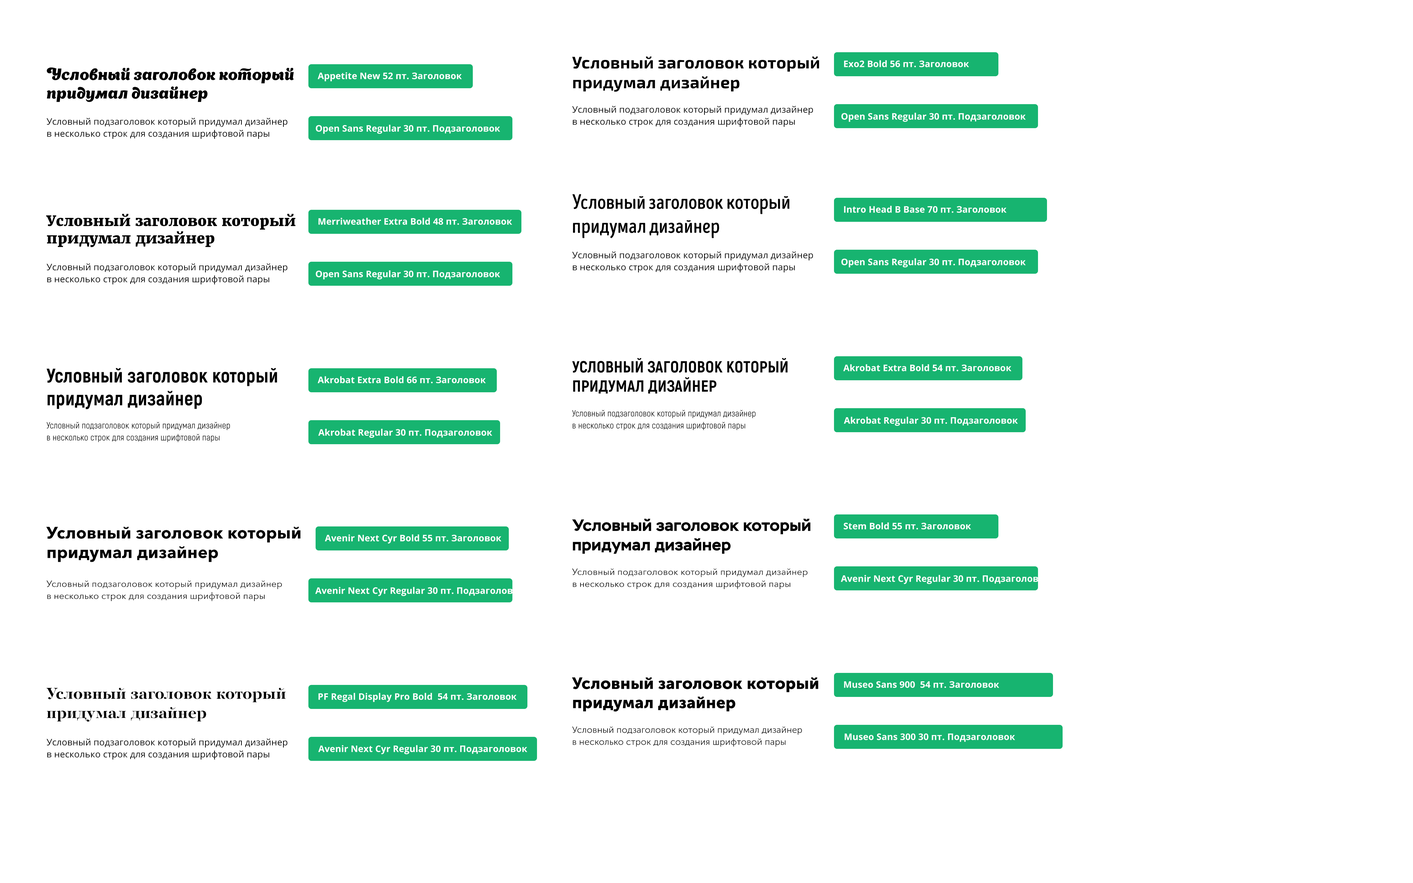
<style>
.page{position:relative;width:1413px;height:883px;background:#ffffff}
.page>*{position:absolute;margin:0}
.t1{font:16.8px/19.8px "Exo2-Bold";letter-spacing:0.01em;color:#000000}
.t2{font:9px "OpenSans-Bold";letter-spacing:0.01em;color:#ffffff}
.t3{font:15.6px/18.6px "AppetiteNew";letter-spacing:0.01em;color:#000000}
.t4{font:9px/12px "OpenSans";letter-spacing:0.01em;color:#000000}
.t5{font:21px/24px "IntroHeadB-Base";letter-spacing:0.01em;color:#000000}
.t6{font:14.4px/17.4px "Merriweather-UltraBold";letter-spacing:0.01em;color:#000000}
.t7{font:16.2px/19.2px "Akrobat-ExtraBold";letter-spacing:0.01em;color:#000000;text-transform:uppercase}
.t8{font:19.8px/22.8px "Akrobat-ExtraBold";letter-spacing:0.01em;color:#000000}
.t9{font:9px/12px "Akrobat-Regular";letter-spacing:0.01em;color:#000000}
.t10{font:16.5px/19.5px "Stem-Bold";letter-spacing:0.01em;color:#000000}
.t11{font:16.5px/19.5px "AvenirNextCyr-Bold";letter-spacing:0.01em;color:#000000}
.t12{font:9px/12px "AvenirNextCyr-Regular";letter-spacing:0.01em;color:#000000}
.t13{font:16.2px/19.2px "MuseoSansCyrl-900";letter-spacing:0.01em;color:#000000}
.t14{font:16.2px/19.2px "PFRegalDisplayPro-Bold";letter-spacing:0.01em;color:#000000}
.t15{font:9px/12px "MuseoSansCyrl-300";letter-spacing:0.01em;color:#000000}
</style>
<div class="page">
<p class="t1" style="left:572px;top:56px;width:247px;height:36px">Условный заголовок который <br>придумал дизайнер</p>
<p class="t2" style="left:844px;top:60px;width:125px;height:7px">Exo2 Bold 56 пт. Заголовок</p>
<p class="t3" style="left:47px;top:67px;width:247px;height:35px">Условный заголовок который <br>придумал дизайнер</p>
<p class="t2" style="left:318px;top:72px;width:144px;height:9px">Appetite New 52 пт. Заголовок</p>
<p class="t4" style="left:572px;top:106px;width:241px;height:21px">Условный подзаголовок который придумал дизайнер <br>в несколько строк для создания шрифтовой пары</p>
<p class="t2" style="left:841px;top:112px;width:185px;height:10px">Open Sans Regular 30 пт. Подзаголовок</p>
<p class="t4" style="left:46px;top:118px;width:241px;height:21px">Условный подзаголовок который придумал дизайнер <br>в несколько строк для создания шрифтовой пары</p>
<p class="t2" style="left:316px;top:124px;width:184px;height:10px">Open Sans Regular 30 пт. Подзаголовок</p>
<p class="t5" style="left:572px;top:194px;width:218px;height:44px">Условный заголовок который <br>придумал дизайнер</p>
<p class="t2" style="left:844px;top:206px;width:162px;height:7px">Intro Head B Base 70 пт. Заголовок</p>
<p class="t6" style="left:46px;top:214px;width:250px;height:33px">Условный заголовок который <br>придумал дизайнер</p>
<p class="t2" style="left:318px;top:218px;width:194px;height:7px">Merriweather Extra Bold 48 пт. Заголовок</p>
<p class="t4" style="left:572px;top:251px;width:241px;height:21px">Условный подзаголовок который придумал дизайнер <br>в несколько строк для создания шрифтовой пары</p>
<p class="t4" style="left:46px;top:263px;width:241px;height:21px">Условный подзаголовок который придумал дизайнер <br>в несколько строк для создания шрифтовой пары</p>
<p class="t2" style="left:316px;top:270px;width:184px;height:9px">Open Sans Regular 30 пт. Подзаголовок</p>
<p class="t2" style="left:841px;top:258px;width:185px;height:9px">Open Sans Regular 30 пт. Подзаголовок</p>
<p class="t7" style="left:572px;top:358px;width:216px;height:36px">Условный заголовок который <br>придумал дизайнер</p>
<p class="t2" style="left:843px;top:364px;width:169px;height:7px">Akrobat Extra Bold 54 пт. Заголовок</p>
<p class="t8" style="left:46px;top:368px;width:231px;height:41px">Условный заголовок который <br>придумал дизайнер</p>
<p class="t2" style="left:318px;top:376px;width:168px;height:7px">Akrobat Extra Bold 66 пт. Заголовок</p>
<p class="t9" style="left:572px;top:410px;width:184px;height:20px">Условный подзаголовок который придумал дизайнер <br>в несколько строк для создания шрифтовой пары</p>
<p class="t9" style="left:46px;top:422px;width:184px;height:20px">Условный подзаголовок который придумал дизайнер <br>в несколько строк для создания шрифтовой пары</p>
<p class="t2" style="left:844px;top:416px;width:174px;height:10px">Akrobat Regular 30 пт. Подзаголовок</p>
<p class="t2" style="left:318px;top:428px;width:174px;height:10px">Akrobat Regular 30 пт. Подзаголовок</p>
<p class="t10" style="left:572px;top:518px;width:239px;height:36px">Условный заголовок который <br>придумал дизайнер</p>
<p class="t11" style="left:46px;top:526px;width:255px;height:36px">Условный заголовок который <br>придумал дизайнер</p>
<p class="t2" style="left:325px;top:534px;width:177px;height:9px">Avenir Next Cyr Bold 55 пт. Заголовок</p>
<p class="t2" style="left:844px;top:522px;width:127px;height:7px">Stem Bold 55 пт. Заголовок</p>
<p class="t12" style="left:572px;top:568px;width:236px;height:21px">Условный подзаголовок который придумал дизайнер <br>в несколько строк для создания шрифтовой пары</p>
<p class="t12" style="left:46px;top:580px;width:236px;height:21px">Условный подзаголовок который придумал дизайнер <br>в несколько строк для создания шрифтовой пары</p>
<p class="t2" style="left:841px;top:574px;width:209px;height:10px">Avenir Next Cyr Regular 30 пт. Подзаголовок</p>
<p class="t2" style="left:315px;top:586px;width:209px;height:10px">Avenir Next Cyr Regular 30 пт. Подзаголовок</p>
<p class="t13" style="left:572px;top:677px;width:246px;height:34px">Условный заголовок который <br>придумал дизайнер</p>
<p class="t14" style="left:46px;top:687px;width:240px;height:35px">Условный заголовок который <br>придумал дизайнер</p>
<p class="t2" style="left:844px;top:681px;width:155px;height:7px">Museo Sans 900  54 пт. Заголовок</p>
<p class="t2" style="left:318px;top:692px;width:199px;height:10px">PF Regal Display Pro Bold  54 пт. Заголовок</p>
<p class="t15" style="left:572px;top:726px;width:230px;height:20px">Условный подзаголовок который придумал дизайнер <br>в несколько строк для создания шрифтовой пары</p>
<p class="t2" style="left:844px;top:733px;width:171px;height:9px">Museo Sans 300 30 пт. Подзаголовок</p>
<p class="t4" style="left:46px;top:738px;width:241px;height:21px">Условный подзаголовок который придумал дизайнер <br>в несколько строк для создания шрифтовой пары</p>
<p class="t2" style="left:318px;top:745px;width:209px;height:9px">Avenir Next Cyr Regular 30 пт. Подзаголовок</p>
</div>
